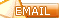
<style>
.page{position:relative;width:59px;height:18px;background:#ffffff}
.page>*{position:absolute;margin:0}
.t1{font:11px "Verdana";color:#ffffff}
</style>
<div class="page">
<p class="t1" style="left:16px;top:7px;width:34px;height:8px">EMAIL</p>
</div>
